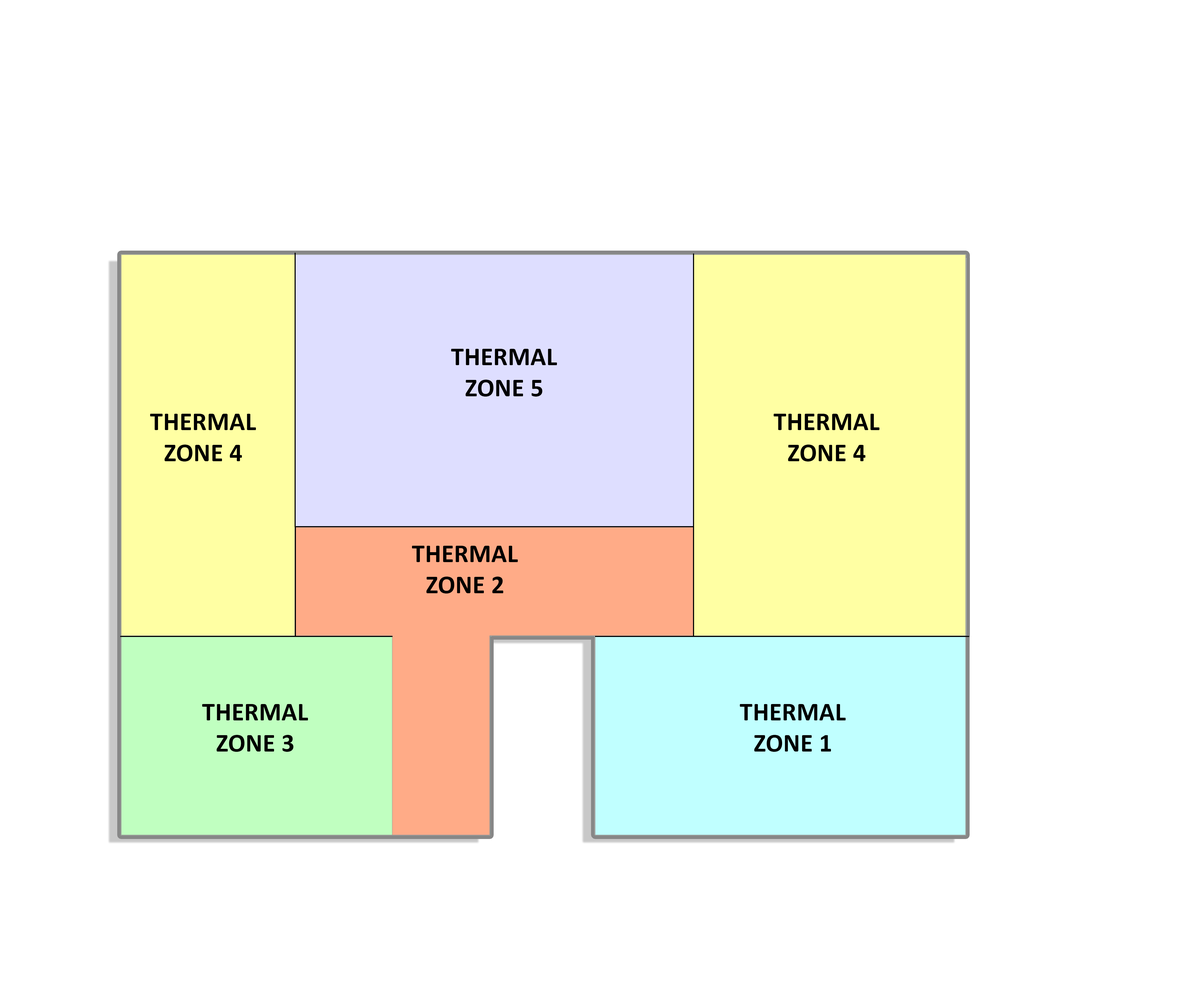
<style>
.page{position:relative;width:1188px;height:1004px;background:#ffffff}
.page>*{position:absolute;margin:0}
.t1{font:25.8px "Calibri-Bold";letter-spacing:0.006em;color:#000000;font-variant:small-caps}
</style>
<div class="page">
<p class="t1" style="left:451px;top:349px;width:106px;height:47px;text-align:center">THERMAL <br>ZONE 5</p>
<p class="t1" style="left:150px;top:414px;width:106px;height:47px;text-align:center">THERMAL <br>ZONE 4</p>
<p class="t1" style="left:773px;top:414px;width:106px;height:47px;text-align:center">THERMAL <br>ZONE 4</p>
<p class="t1" style="left:412px;top:546px;width:106px;height:47px;text-align:center">THERMAL <br>ZONE 2</p>
<p class="t1" style="left:202px;top:704px;width:106px;height:48px;text-align:center">THERMAL <br>ZONE 3</p>
<p class="t1" style="left:740px;top:704px;width:106px;height:48px;text-align:center">THERMAL <br>ZONE 1</p>
</div>
